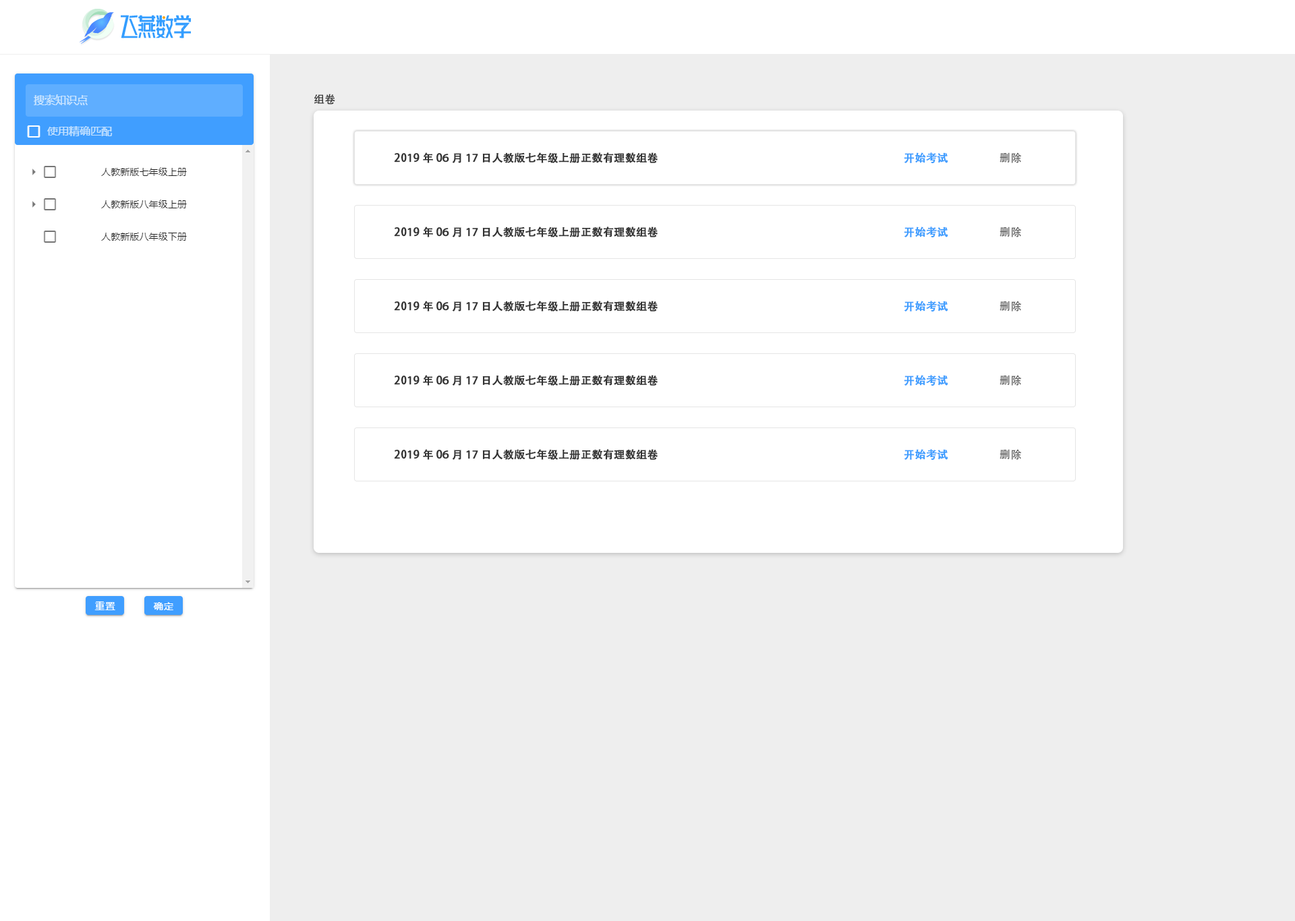
<style>
.page{position:relative;width:1295px;height:921px;background:#ffffff}
.page>*{position:absolute;margin:0}
.t1{font:10.8px "AdobeHeitiStd-Regular";color:#333333}
.t2{font:10.8px "AdobeHeitiStd-Regular";color:#333333;font-weight:bold}
.t3{font:10.8px "AdobeHeitiStd-Regular";color:#409eff;font-weight:bold}
.t4{font:10.8px "AdobeHeitiStd-Regular";color:#666666}
</style>
<div class="page">
<p class="t1" style="left:314px;top:94px;width:21px;height:11px">组卷</p>
<p class="t2" style="left:394px;top:152px;width:264px;height:11px">2019年06月17日人教版七年级上册正数有理数组卷</p>
<p class="t3" style="left:904px;top:152px;width:44px;height:12px">开始考试</p>
<p class="t4" style="left:999px;top:152px;width:23px;height:11px">删除</p>
<p class="t2" style="left:394px;top:227px;width:264px;height:10px">2019年06月17日人教版七年级上册正数有理数组卷</p>
<p class="t3" style="left:904px;top:227px;width:44px;height:11px">开始考试</p>
<p class="t4" style="left:999px;top:227px;width:23px;height:10px">删除</p>
<p class="t2" style="left:394px;top:301px;width:264px;height:11px">2019年06月17日人教版七年级上册正数有理数组卷</p>
<p class="t3" style="left:904px;top:301px;width:44px;height:11px">开始考试</p>
<p class="t4" style="left:999px;top:301px;width:23px;height:11px">删除</p>
<p class="t2" style="left:394px;top:375px;width:264px;height:11px">2019年06月17日人教版七年级上册正数有理数组卷</p>
<p class="t3" style="left:904px;top:375px;width:44px;height:11px">开始考试</p>
<p class="t4" style="left:999px;top:375px;width:23px;height:11px">删除</p>
<p class="t2" style="left:394px;top:449px;width:264px;height:11px">2019年06月17日人教版七年级上册正数有理数组卷</p>
<p class="t3" style="left:904px;top:449px;width:44px;height:12px">开始考试</p>
<p class="t4" style="left:999px;top:449px;width:23px;height:11px">删除</p>
</div>
